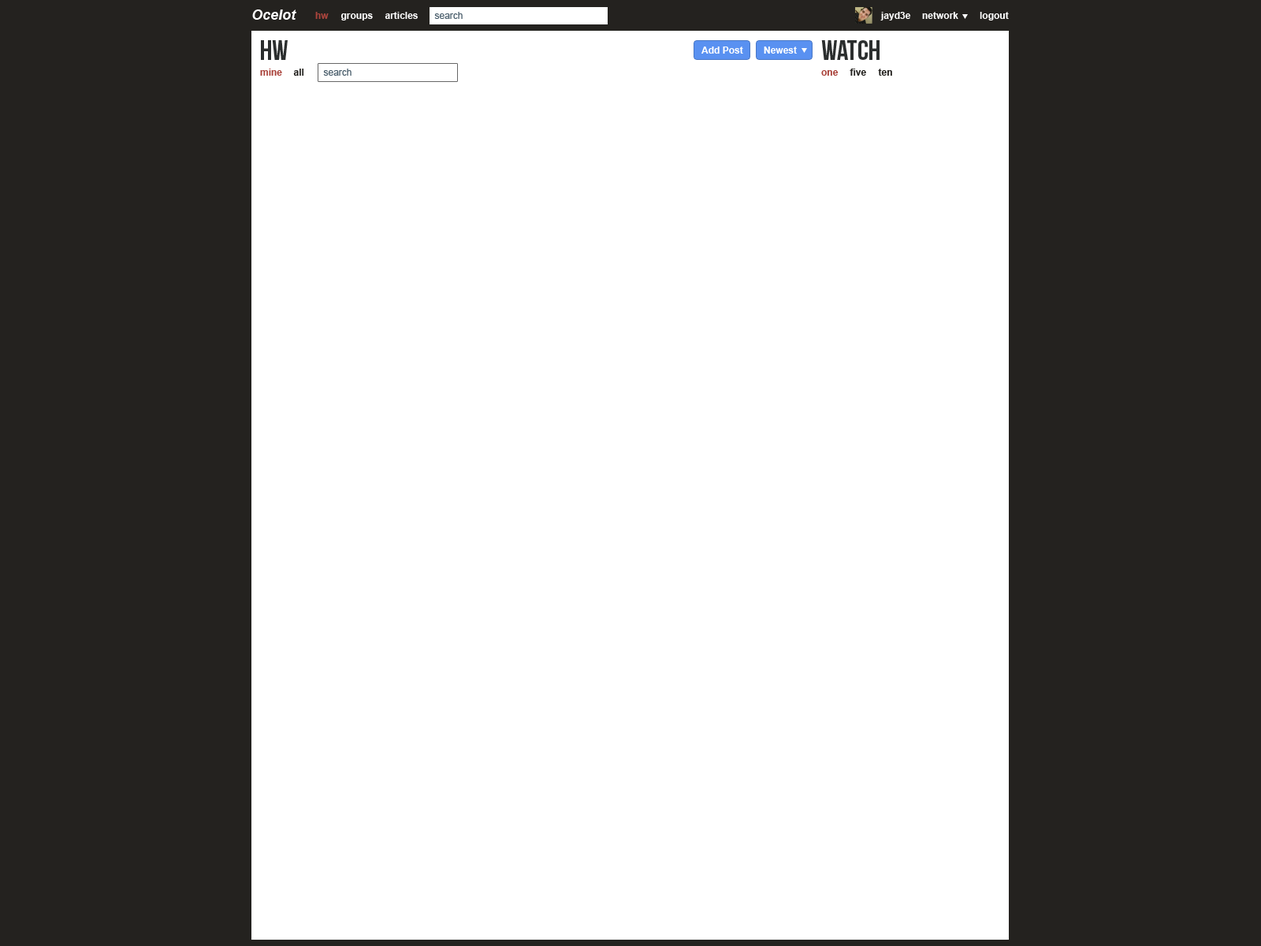
<style>
.page{position:relative;width:1261px;height:946px;background:#ffffff}
.page>*{position:absolute;margin:0}
.t1{font:14.2px "Arial-BoldItalicMT";color:#ffffff}
.t2{font:9.5px "Arial-BoldMT";color:#aa443c}
.t3{font:9.5px "Arial-BoldMT";color:#ffffff}
.t4{font:9.5px "ArialMT";color:#4b5f6d}
.t5{font:28.4px "BebasNeue";color:#2b2e2e}
.t6{font:9.5px "Arial-BoldMT";color:#24221f}
</style>
<div class="page">
<p class="t1" style="left:252px;top:9px;width:44px;height:11px">Ocelot</p>
<p class="t2" style="left:315px;top:12px;width:14px;height:7px">hw</p>
<p class="t3" style="left:340px;top:13px;width:33px;height:7px">groups</p>
<p class="t3" style="left:385px;top:12px;width:33px;height:7px">articles</p>
<p class="t4" style="left:434px;top:12px;width:29px;height:7px">search</p>
<p class="t3" style="left:880px;top:12px;width:31px;height:8px">jayd3e</p>
<p class="t3" style="left:922px;top:12px;width:36px;height:7px">network</p>
<p class="t3" style="left:980px;top:12px;width:29px;height:8px">logout</p>
<p class="t5" style="left:261px;top:40px;width:27px;height:20px">hw</p>
<p class="t5" style="left:821px;top:40px;width:58px;height:20px">watch</p>
<p class="t3" style="left:701px;top:46px;width:42px;height:8px">Add Post</p>
<p class="t3" style="left:764px;top:46px;width:33px;height:8px">Newest</p>
<p class="t2" style="left:260px;top:69px;width:22px;height:7px">mine</p>
<p class="t6" style="left:293px;top:69px;width:11px;height:7px">all</p>
<p class="t4" style="left:323px;top:69px;width:28px;height:7px">search</p>
<p class="t2" style="left:821px;top:70px;width:18px;height:6px">one</p>
<p class="t6" style="left:850px;top:69px;width:16px;height:7px">five</p>
<p class="t6" style="left:878px;top:69px;width:14px;height:7px">ten</p>
</div>
